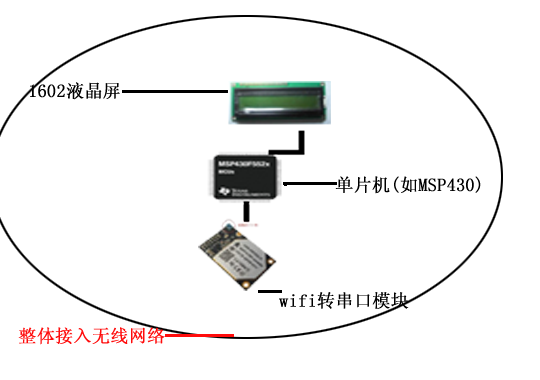
<style>
.page{position:relative;width:540px;height:380px;background:#ffffff}
.page>*{position:absolute;margin:0}
.t1{font:18px "SimSun";color:#000000;font-weight:bold}
.t2{font:18px "SimSun";color:#ff0c0c;font-weight:bold}
</style>
<div class="page">
<p class="t1" style="left:30px;top:82px;width:90px;height:18px">1602液晶屏</p>
<p class="t1" style="left:335px;top:176px;width:146px;height:18px">单片机(如MSP430)</p>
<p class="t1" style="left:279px;top:292px;width:130px;height:17px">wifi转串口模块</p>
<p class="t2" style="left:18px;top:327px;width:147px;height:18px">整体接入无线网络</p>
</div>
